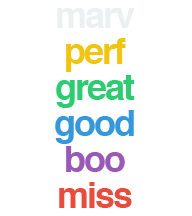
<style>
.page{position:relative;width:192px;height:216px;background:#ffffff}
.page>*{position:absolute;margin:0}
.t1{font:36px "Helvetica-Bold";letter-spacing:-0.05em;color:#ecf0f1}
.t2{font:36px "Helvetica-Bold";letter-spacing:-0.05em;color:#f1c40f}
.t3{font:36px "Helvetica-Bold";letter-spacing:-0.05em;color:#2ecc71}
.t4{font:36px "Helvetica-Bold";letter-spacing:-0.05em;color:#3498db}
.t5{font:36px "Helvetica-Bold";letter-spacing:-0.05em;color:#9b59b6}
.t6{font:36px "Helvetica-Bold";letter-spacing:-0.05em;color:#e74c3c}
</style>
<div class="page">
<p class="t1" style="left:57px;top:8px;width:78px;height:20px">marv</p>
<p class="t2" style="left:66px;top:38px;width:60px;height:34px">perf</p>
<p class="t3" style="left:56px;top:75px;width:79px;height:33px">great</p>
<p class="t4" style="left:55px;top:110px;width:79px;height:34px">good</p>
<p class="t5" style="left:66px;top:146px;width:59px;height:26px">boo</p>
<p class="t6" style="left:59px;top:182px;width:73px;height:26px">miss</p>
</div>
